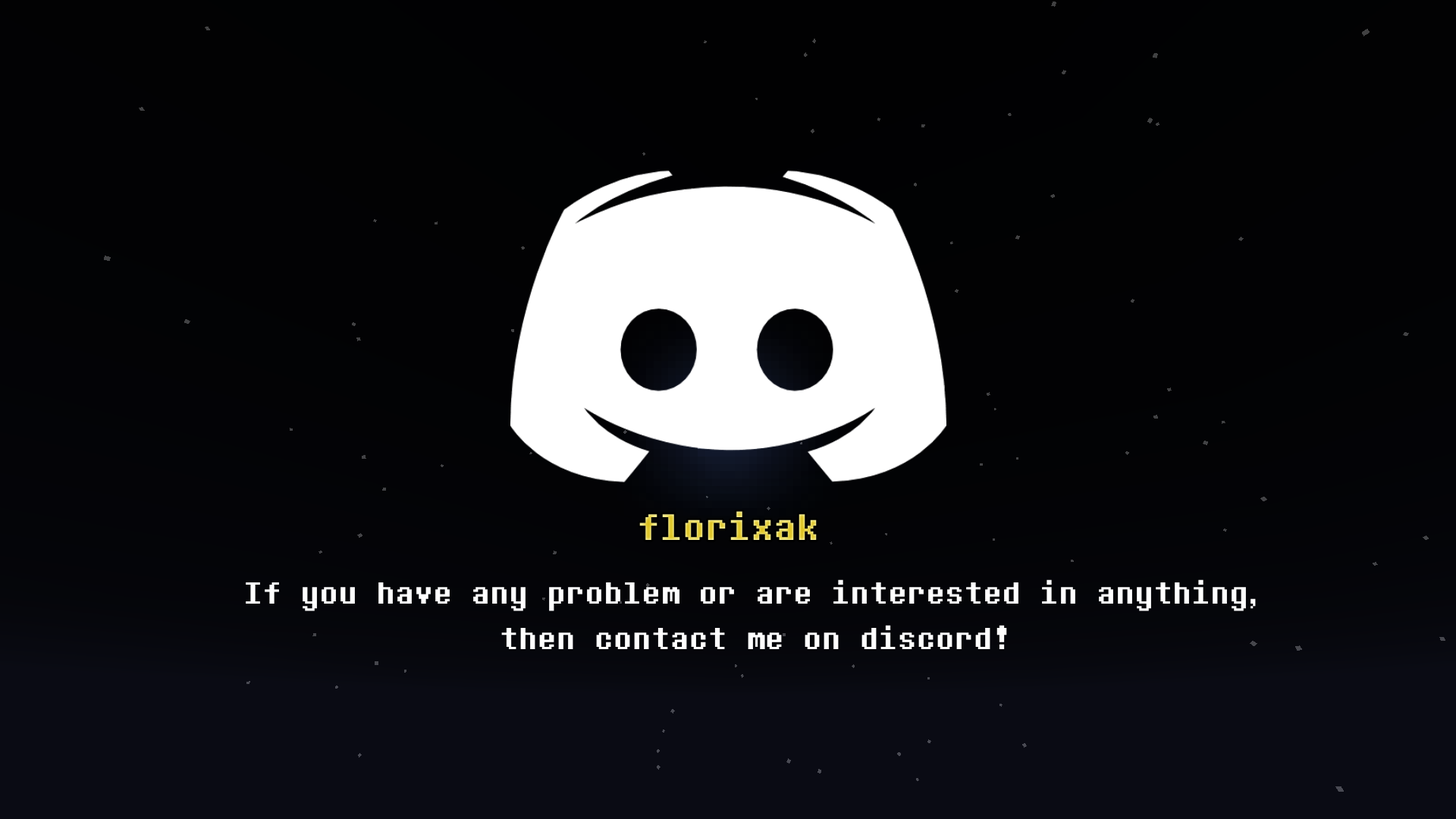
<style>
.page{position:relative;width:1456px;height:819px}
.page>*{position:absolute;margin:0}
.t1{font:45.5px "DeterminationMonoWeb"}
.t2{font:37.9px "DeterminationMonoWeb";color:#ffffff}
</style>
<div class="page">
<p class="t1" style="left:639px;top:511px;width:178px;height:29px">florixak</p>
<p class="t2" style="left:246px;top:579px;width:1010px;height:70px;text-align:center">If you have any problem or are interested in anything,<br>then contact me on discord!</p>
</div>
